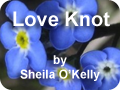
<style>
.page{position:relative;width:120px;height:90px}
.page>*{position:absolute;margin:0}
.t1{font:20px "Arial-BoldMT";color:#ffffff}
.t2{font:12px "Arial-BoldMT";color:#ffffff}
</style>
<div class="page">
<p class="t1" style="left:13px;top:11px;width:97px;height:16px">Love Knot</p>
<p class="t2" style="left:20px;top:55px;width:80px;height:26px;text-align:center">by<br>Sheila O’Kelly</p>
</div>
